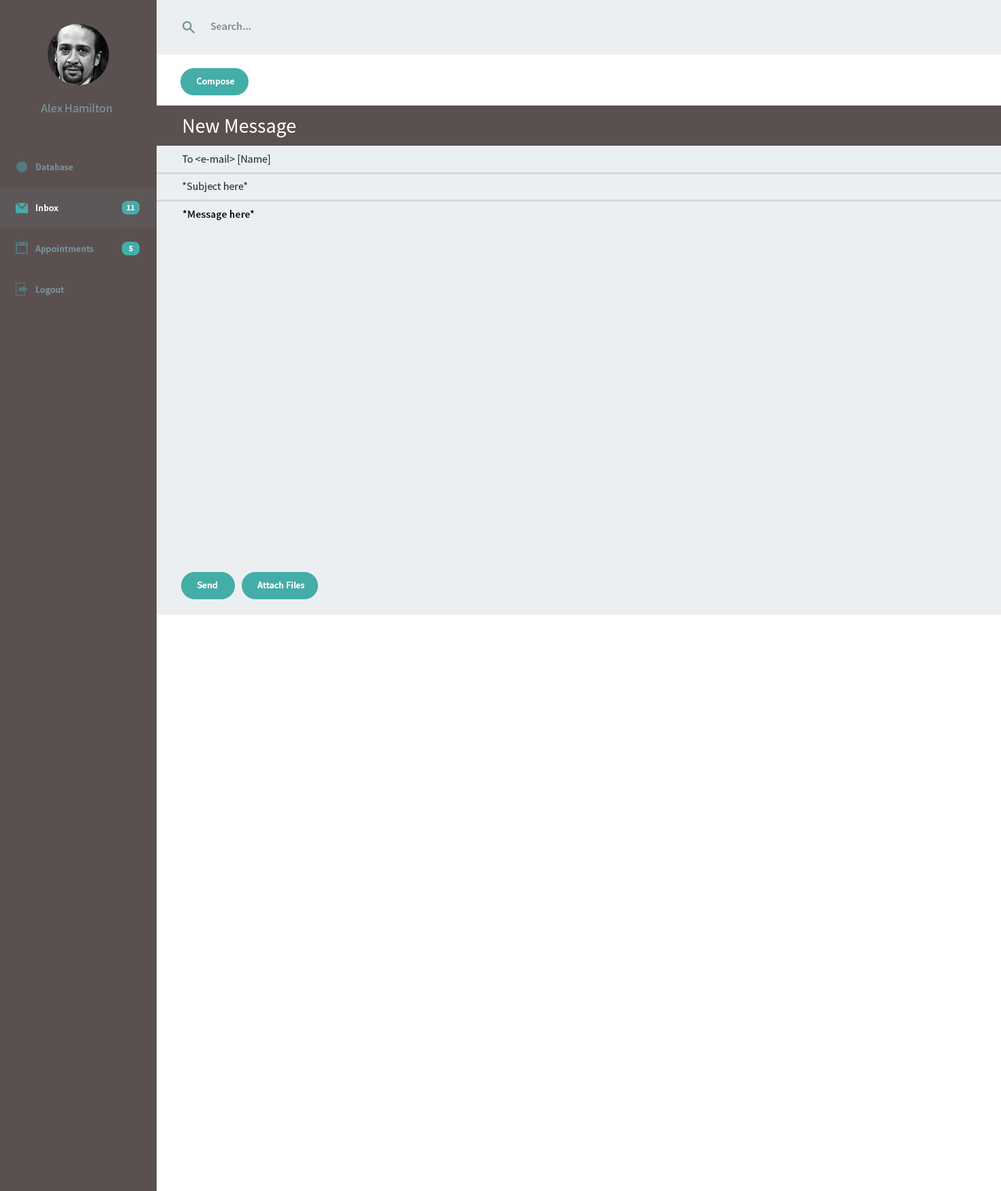
<style>
.page{position:relative;width:1001px;height:1191px;background:#ffffff}
.page>*{position:absolute;margin:0}
.t1{font:10.9px "SourceSansPro-Semibold";color:#78909c}
.t2{font:9.5px "SourceSansPro-Semibold";color:#ffffff}
.t3{font:12.3px "SourceSansPro-Regular";color:#78909c}
.t4{font:20.4px "SourceSansPro-Regular";color:#ffffff}
.t5{font:11px "SourceSansPro-Regular";color:#263238}
.t6{font:9.5px "SourceSansPro-Semibold";color:#78909c}
.t7{font:8.2px "SourceSansPro-Bold";color:#f8fafb}
.t8{font:10.9px "SourceSansPro-Semibold";color:#000000}
</style>
<div class="page">
<p class="t1" style="left:210px;top:22px;width:41px;height:8px">Search...</p>
<p class="t2" style="left:197px;top:78px;width:37px;height:8px">Compose</p>
<p class="t3" style="left:41px;top:104px;width:71px;height:8px">Alex Hamilton</p>
<p class="t4" style="left:184px;top:119px;width:112px;height:19px">New Message</p>
<p class="t5" style="left:182px;top:155px;width:88px;height:10px">To &lt;e-mail&gt; [Name]</p>
<p class="t6" style="left:36px;top:163px;width:37px;height:7px">Database</p>
<p class="t5" style="left:183px;top:182px;width:64px;height:10px">*Subject here*</p>
<p class="t2" style="left:36px;top:204px;width:23px;height:7px">Inbox</p>
<p class="t7" style="left:127px;top:205px;width:8px;height:5px">11</p>
<p class="t8" style="left:183px;top:210px;width:71px;height:11px">*Message here*</p>
<p class="t6" style="left:35px;top:245px;width:58px;height:9px">Appointments</p>
<p class="t7" style="left:129px;top:246px;width:4px;height:5px">5</p>
<p class="t6" style="left:36px;top:286px;width:28px;height:10px">Logout</p>
<p class="t2" style="left:197px;top:582px;width:20px;height:6px">Send</p>
<p class="t2" style="left:257px;top:582px;width:47px;height:6px">Attach Files</p>
</div>
